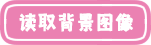
<style>
.page{position:relative;width:151px;height:45px;background:#eb81b2}
.page>*{position:absolute;margin:0}
.t1{font:12px "shetumodengxiaofangti";color:#ffffff;font-weight:bold;scale:0.94 1}
</style>
<div class="page">
<p class="t1" style="left:19px;top:13px;width:114px;height:19px">读取背景图像</p>
</div>
